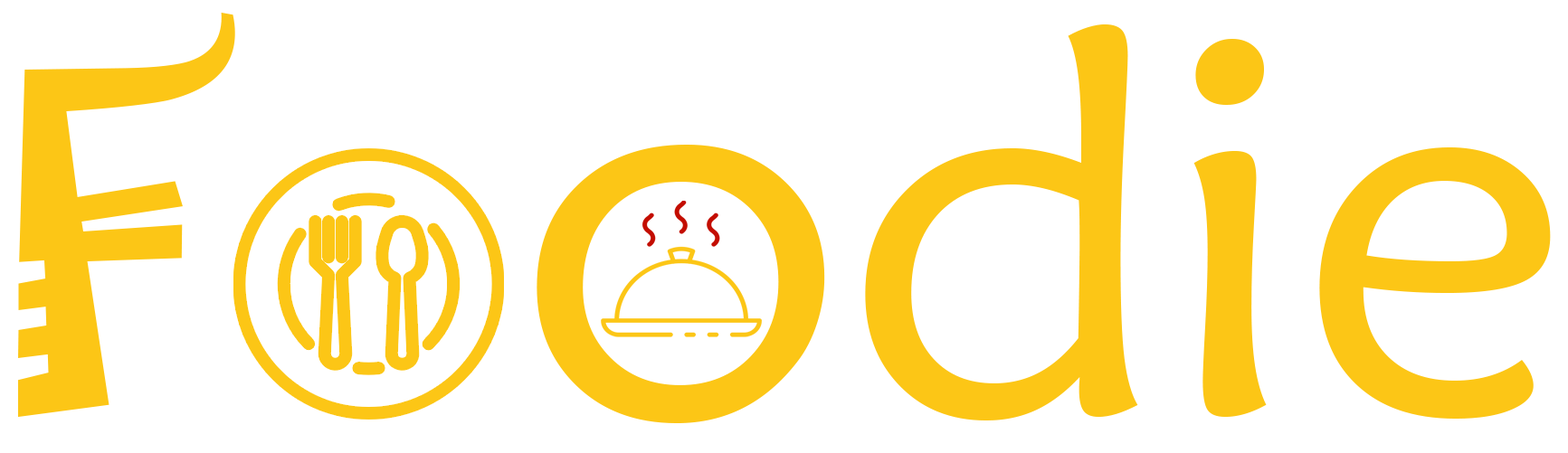
<style>
.page{position:relative;width:1568px;height:453px;background:#ffffff}
.page>*{position:absolute;margin:0}
.t1{font:546.6px "MaiandraGD-Regular";color:#fcc616}
</style>
<div class="page">
<p class="t1" style="left:537px;top:24px;width:1014px;height:399px">odie</p>
</div>
